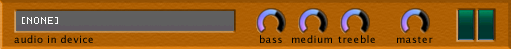
<style>
.page{position:relative;width:511px;height:49px}
.page>*{position:absolute;margin:0}
.t1{font:10px "LucidaSansUnicode";letter-spacing:0.05em;color:#000000}
</style>
<div class="page">
<p class="t1" style="left:14px;top:35px;width:79px;height:8px">audio in device</p>
<p class="t1" style="left:260px;top:35px;width:22px;height:8px">bass</p>
<p class="t1" style="left:292px;top:35px;width:40px;height:8px">medium</p>
<p class="t1" style="left:338px;top:35px;width:37px;height:8px">treeble</p>
<p class="t1" style="left:397px;top:36px;width:36px;height:7px">master</p>
</div>
